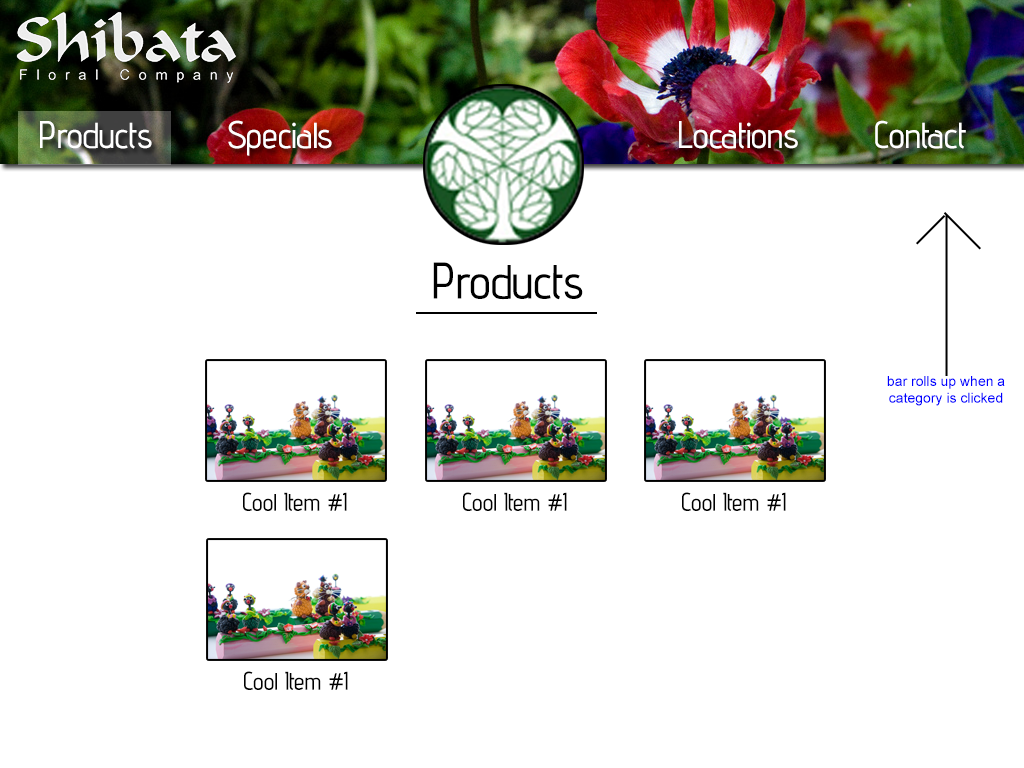
<style>
.page{position:relative;width:1024px;height:768px;background:#ffffff}
.page>*{position:absolute;margin:0}
.t1{font:36px "advent-ExtraBold";color:#ffffff}
.t2{font:48px "advent-ExtraBold";color:#000000}
.t3{font:14px "ArialMT";color:#0000ff}
.t4{font:24px "advent-ExtraBold";color:#000000}
</style>
<div class="page">
<p class="t1" style="left:40px;top:120px;width:926px;height:36px">Products       Specials                                Locations       Contact</p>
<p class="t2" style="left:433px;top:262px;width:150px;height:38px">Products</p>
<p class="t3" style="left:887px;top:376px;width:118px;height:30px;text-align:center">bar rolls up when a category is clicked</p>
<p class="t4" style="left:243px;top:492px;width:104px;height:19px">Cool Item #1</p>
<p class="t4" style="left:463px;top:492px;width:104px;height:19px">Cool Item #1</p>
<p class="t4" style="left:682px;top:492px;width:104px;height:19px">Cool Item #1</p>
<p class="t4" style="left:244px;top:671px;width:104px;height:19px">Cool Item #1</p>
</div>
